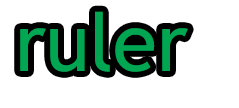
<style>
.page{position:relative;width:239px;height:108px;background:#ffffff}
.page>*{position:absolute;margin:0}
.t1{font:80px "TrebuchetMS";color:#00a651}
</style>
<div class="page">
<p class="t1" style="left:20px;top:11px;width:168px;height:61px">ruler</p>
</div>
